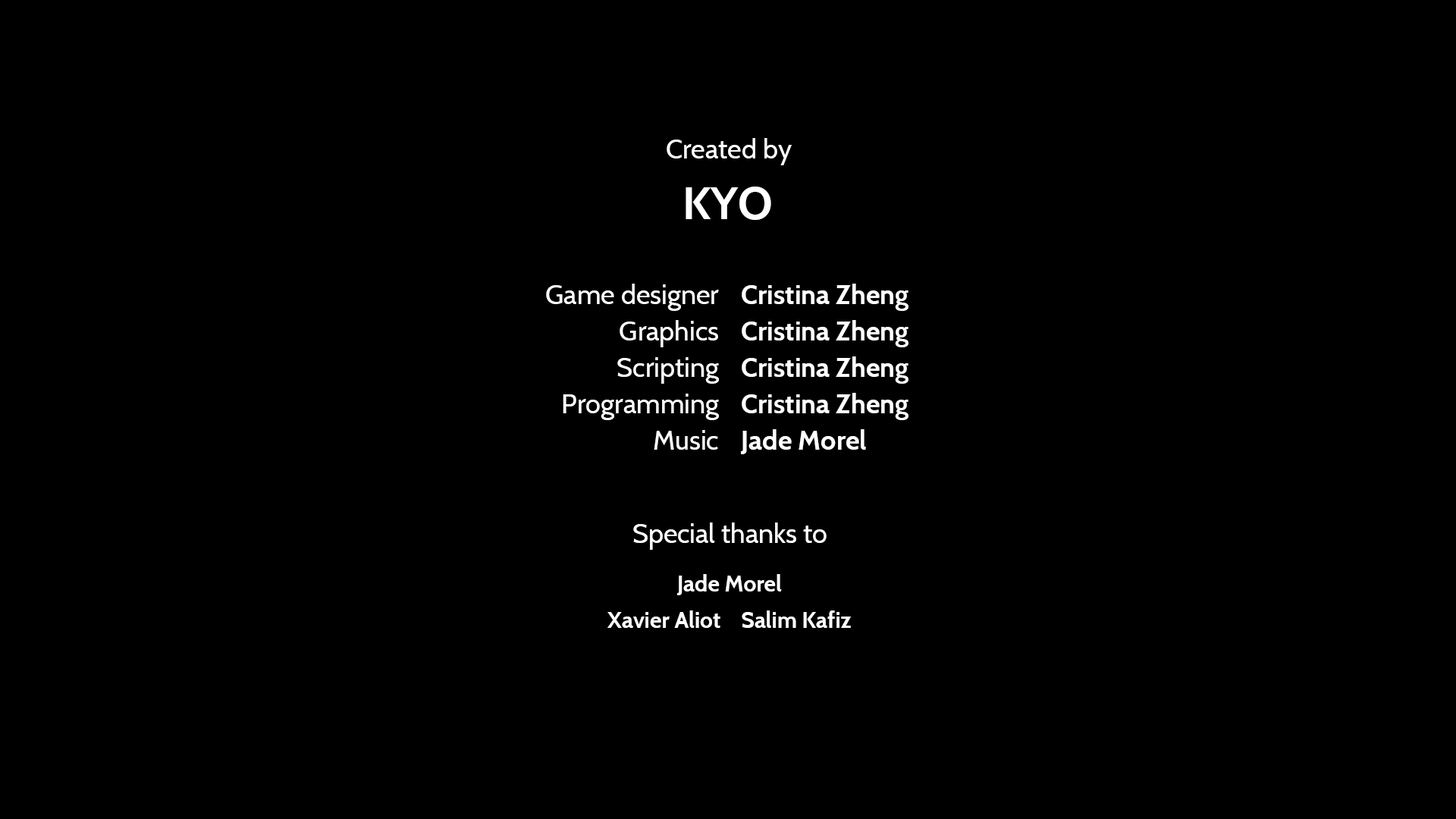
<style>
.page{position:relative;width:1456px;height:819px;background:#000000}
.page>*{position:absolute;margin:0}
.t1{font:27.3px "Cabin-Regular";color:#ffffff}
.t2{font:45.5px "Cabin-Bold";color:#ffffff}
.t3{font:27.3px/36.4px "Cabin-Regular";color:#ffffff}
.t4{font:27.3px/36.4px "Cabin-Bold";color:#ffffff}
.t5{font:22.7px/36.4px "Cabin-Bold";color:#ffffff}
</style>
<div class="page">
<p class="t1" style="left:667px;top:138px;width:125px;height:27px">Created by</p>
<p class="t2" style="left:686px;top:187px;width:85px;height:33px">KYO</p>
<p class="t3" style="left:546px;top:284px;width:173px;height:166px;text-align:right">Game designer  <br>Graphics  <br>Scripting  <br>Programming  <br>Music</p>
<p class="t4" style="left:740px;top:284px;width:168px;height:170px">Cristina Zheng<br>  Cristina Zheng<br>  Cristina Zheng<br>  Cristina Zheng<br>  Jade Morel</p>
<p class="t1" style="left:633px;top:522px;width:194px;height:28px">Special thanks to</p>
<p class="t5" style="left:607px;top:574px;width:245px;height:54px;text-align:center">Jade Morel<br>Xavier Aliot    Salim Kafiz</p>
</div>
